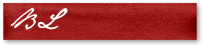
<style>
.page{position:relative;width:205px;height:45px}
.page>*{position:absolute;margin:0}
.t1{font:22.7px "JaneAusten";letter-spacing:-0.02em;color:#ffffff}
</style>
<div class="page">
<p class="t1" style="left:10px;top:7px;width:58px;height:23px">BL</p>
</div>
